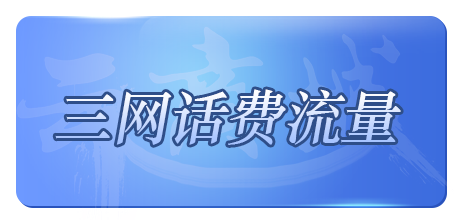
<style>
.page{position:relative;width:460px;height:220px}
.page>*{position:absolute;margin:0}
.t1{font:59px "STZhongsong";letter-spacing:-0.025em;font-style:italic}
</style>
<div class="page">
<p class="t1" style="left:55px;top:89px;width:346px;height:56px">三网话费流量</p>
</div>
